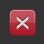
<style>
.page{position:relative;width:44px;height:44px;background:#333333}
.page>*{position:absolute;margin:0}
.t1{font:22.7px "Helvetica";color:#d8d8d8;scale:1.27 1}
</style>
<div class="page">
<p class="t1" style="left:16px;top:16px;width:13px;height:14px;rotate:-90deg">x</p>
</div>
